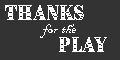
<style>
.page{position:relative;width:120px;height:60px;background:#333333}
.page>*{position:absolute;margin:0}
.t1{font:18px "BrimNarrow-Combined1";color:#ffffff}
.t2{font:16px "BlackadderITC-Regular";color:#ffffff}
</style>
<div class="page">
<p class="t1" style="left:5px;top:5px;width:79px;height:15px">Thanks</p>
<p class="t2" style="left:40px;top:24px;width:36px;height:14px">for the</p>
<p class="t1" style="left:59px;top:37px;width:48px;height:15px">Play</p>
</div>
